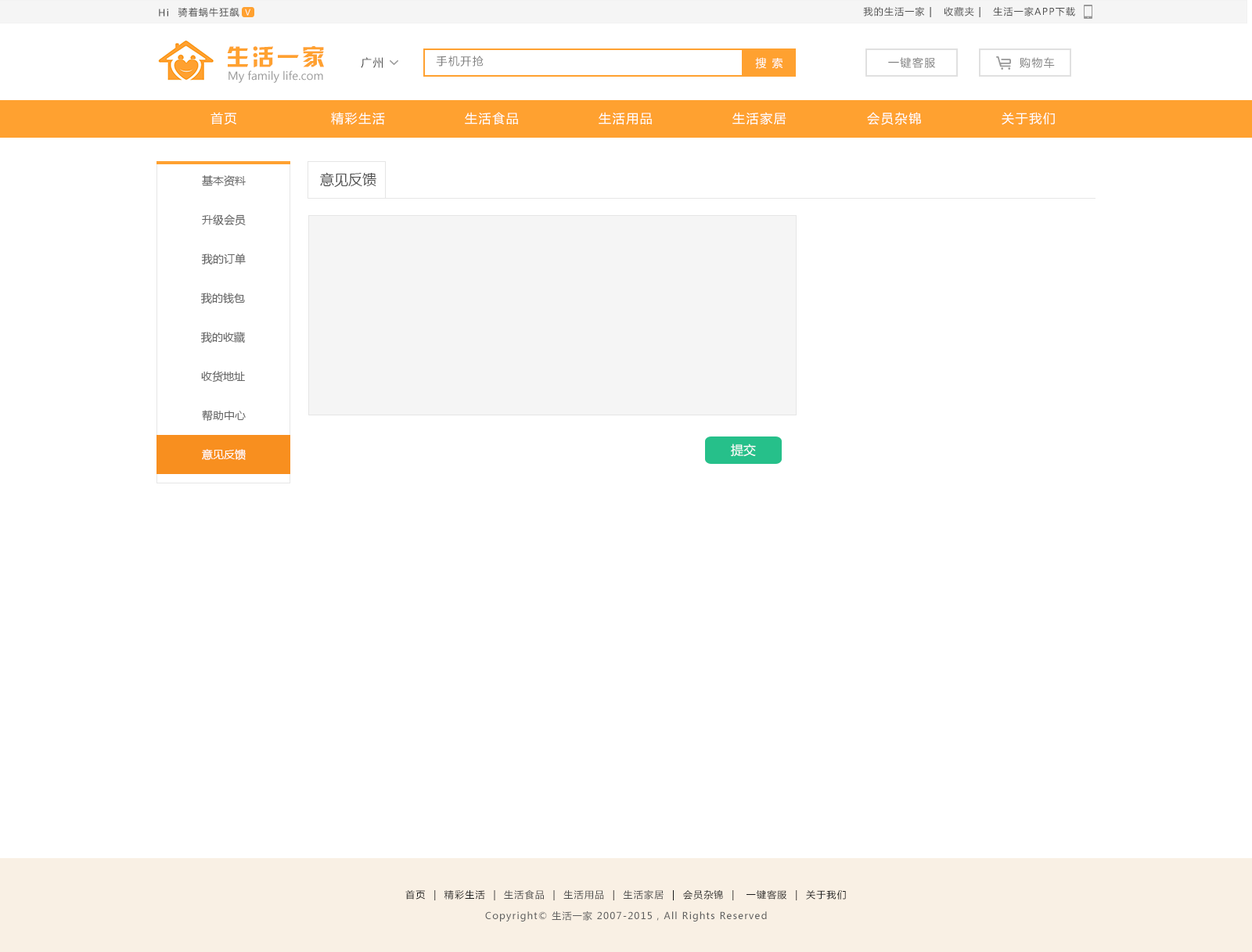
<style>
.page{position:relative;width:1252px;height:952px;background:#ffffff}
.page>*{position:absolute;margin:0}
.t1{font:9.4px "MicrosoftYaHei";letter-spacing:0.1em;color:#4d4d4d}
.t2{font:7.8px "MicrosoftYaHei";letter-spacing:0.1em;color:#ffffff}
.t3{font:22.7px "HYk2gj";letter-spacing:0.1em;color:#ffa130}
.t4{font:11px "MicrosoftYaHei";letter-spacing:0.1em;color:#4d4d4d}
.t5{font:11px "MicrosoftYaHei";letter-spacing:0.1em;color:#808080}
.t6{font:11px "MicrosoftYaHei";letter-spacing:0.1em;color:#ffffff}
.t7{font:11px "MicrosoftYaHei";color:#999999}
.t8{font:12.5px "MicrosoftYaHei";letter-spacing:0.1em;color:#ffffff}
.t9{font:12.9px "MicrosoftYaHei";letter-spacing:0.1em;color:#ffffff}
.t10{font:14.1px "MicrosoftYaHei";color:#4d4d4d}
.t11{font:11px "MicrosoftYaHei";color:#666666}
.t12{font:11px "MicrosoftYaHei";color:#656565}
.t13{font:11px "MicrosoftYaHei";color:#ffffff}
.t14{font:12.5px "MicrosoftYaHei";color:#ffffff}
.t15{font:9.4px "MicrosoftYaHei";letter-spacing:0.1em;color:#1a1a1a}
.t16{font:9.4px "MicrosoftYaHei";letter-spacing:0.1em;color:#5e5e5e}
</style>
<div class="page">
<p class="t1" style="left:159px;top:9px;width:9px;height:7px">Hi</p>
<p class="t1" style="left:178px;top:7px;width:61px;height:10px">骑着蜗牛狂飙</p>
<p class="t2" style="left:245px;top:9px;width:5px;height:7px">V</p>
<p class="t1" style="left:863px;top:7px;width:212px;height:10px">我的生活一家 |   收藏夹 |   生活一家APP下载</p>
<p class="t3" style="left:227px;top:46px;width:97px;height:22px">生活一家</p>
<p class="t4" style="left:361px;top:57px;width:22px;height:11px">广州</p>
<p class="t5" style="left:436px;top:56px;width:48px;height:11px">手机开抢</p>
<p class="t6" style="left:755px;top:57px;width:28px;height:12px">搜 索</p>
<p class="t5" style="left:888px;top:57px;width:48px;height:11px">一键客服</p>
<p class="t5" style="left:1020px;top:57px;width:35px;height:11px">购物车</p>
<p class="t7" style="left:229px;top:70px;width:94px;height:13px">My family life.com</p>
<p class="t8" style="left:211px;top:112px;width:25px;height:13px">首页</p>
<p class="t8" style="left:331px;top:112px;width:54px;height:13px">精彩生活</p>
<p class="t8" style="left:465px;top:112px;width:53px;height:13px">生活食品</p>
<p class="t8" style="left:599px;top:112px;width:53px;height:13px">生活用品</p>
<p class="t8" style="left:732px;top:112px;width:54px;height:13px">生活家居</p>
<p class="t9" style="left:867px;top:112px;width:54px;height:13px">会员杂锦</p>
<p class="t8" style="left:1002px;top:112px;width:53px;height:13px">关于我们</p>
<p class="t10" style="left:320px;top:172px;width:56px;height:15px">意见反馈</p>
<p class="t11" style="left:202px;top:175px;width:44px;height:11px">基本资料</p>
<p class="t12" style="left:202px;top:214px;width:44px;height:12px">升级会员</p>
<p class="t12" style="left:201px;top:254px;width:45px;height:11px">我的订单</p>
<p class="t12" style="left:200px;top:293px;width:45px;height:11px">我的钱包</p>
<p class="t12" style="left:200px;top:332px;width:45px;height:12px">我的收藏</p>
<p class="t12" style="left:201px;top:371px;width:44px;height:12px">收货地址</p>
<p class="t12" style="left:202px;top:410px;width:44px;height:12px">帮助中心</p>
<p class="t13" style="left:202px;top:449px;width:44px;height:11px">意见反馈</p>
<p class="t14" style="left:731px;top:444px;width:25px;height:13px">提交</p>
<p class="t15" style="left:405px;top:890px;width:441px;height:11px">首页  |  精彩生活  |  <span class="t1">生活食品</span>  |  <span class="t1">生活用品</span>  |  <span class="t1">生活家居</span>  |  会员杂锦  |   一键客服  |  关于我们</p>
<p class="t16" style="left:485px;top:911px;width:282px;height:11px">Copyright© 生活一家 2007-2015，All Rights Reserved</p>
</div>
